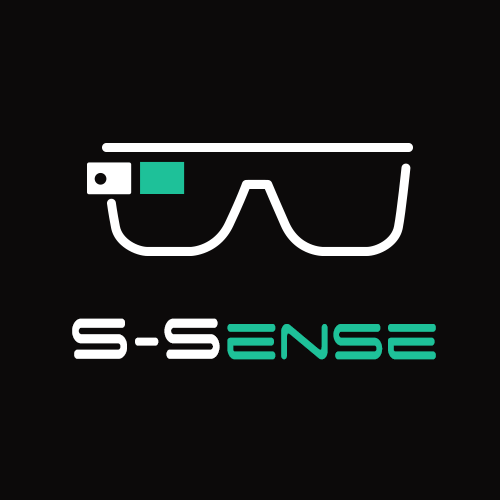
<style>
.page{position:relative;width:500px;height:500px;background:#0c0a0a}
.page>*{position:absolute;margin:0}
.t1{font:81.2px "SpaceAge";color:#1ec199;scale:0.73 1}
.t2{font:91.2px "SpaceAge";color:#ffffff;font-weight:bold;scale:0.73 1}
.t3{font:81.2px "SpaceAge";color:#ffffff;scale:0.73 1}
</style>
<div class="page">
<p class="t1" style="left:72px;top:318px;width:364px;height:42px"><span class="t2">S</span><span class="t3">-</span><span class="t2">S</span>ense</p>
</div>
